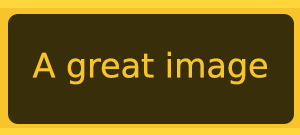
<style>
.page{position:relative;width:300px;height:135px;background:#392e0a}
.page>*{position:absolute;margin:0}
.t1{font:33.3px "DejaVuSans";color:#f7c52b}
</style>
<div class="page">
<p class="t1" style="left:32px;top:51px;width:235px;height:34px">A great image</p>
</div>
